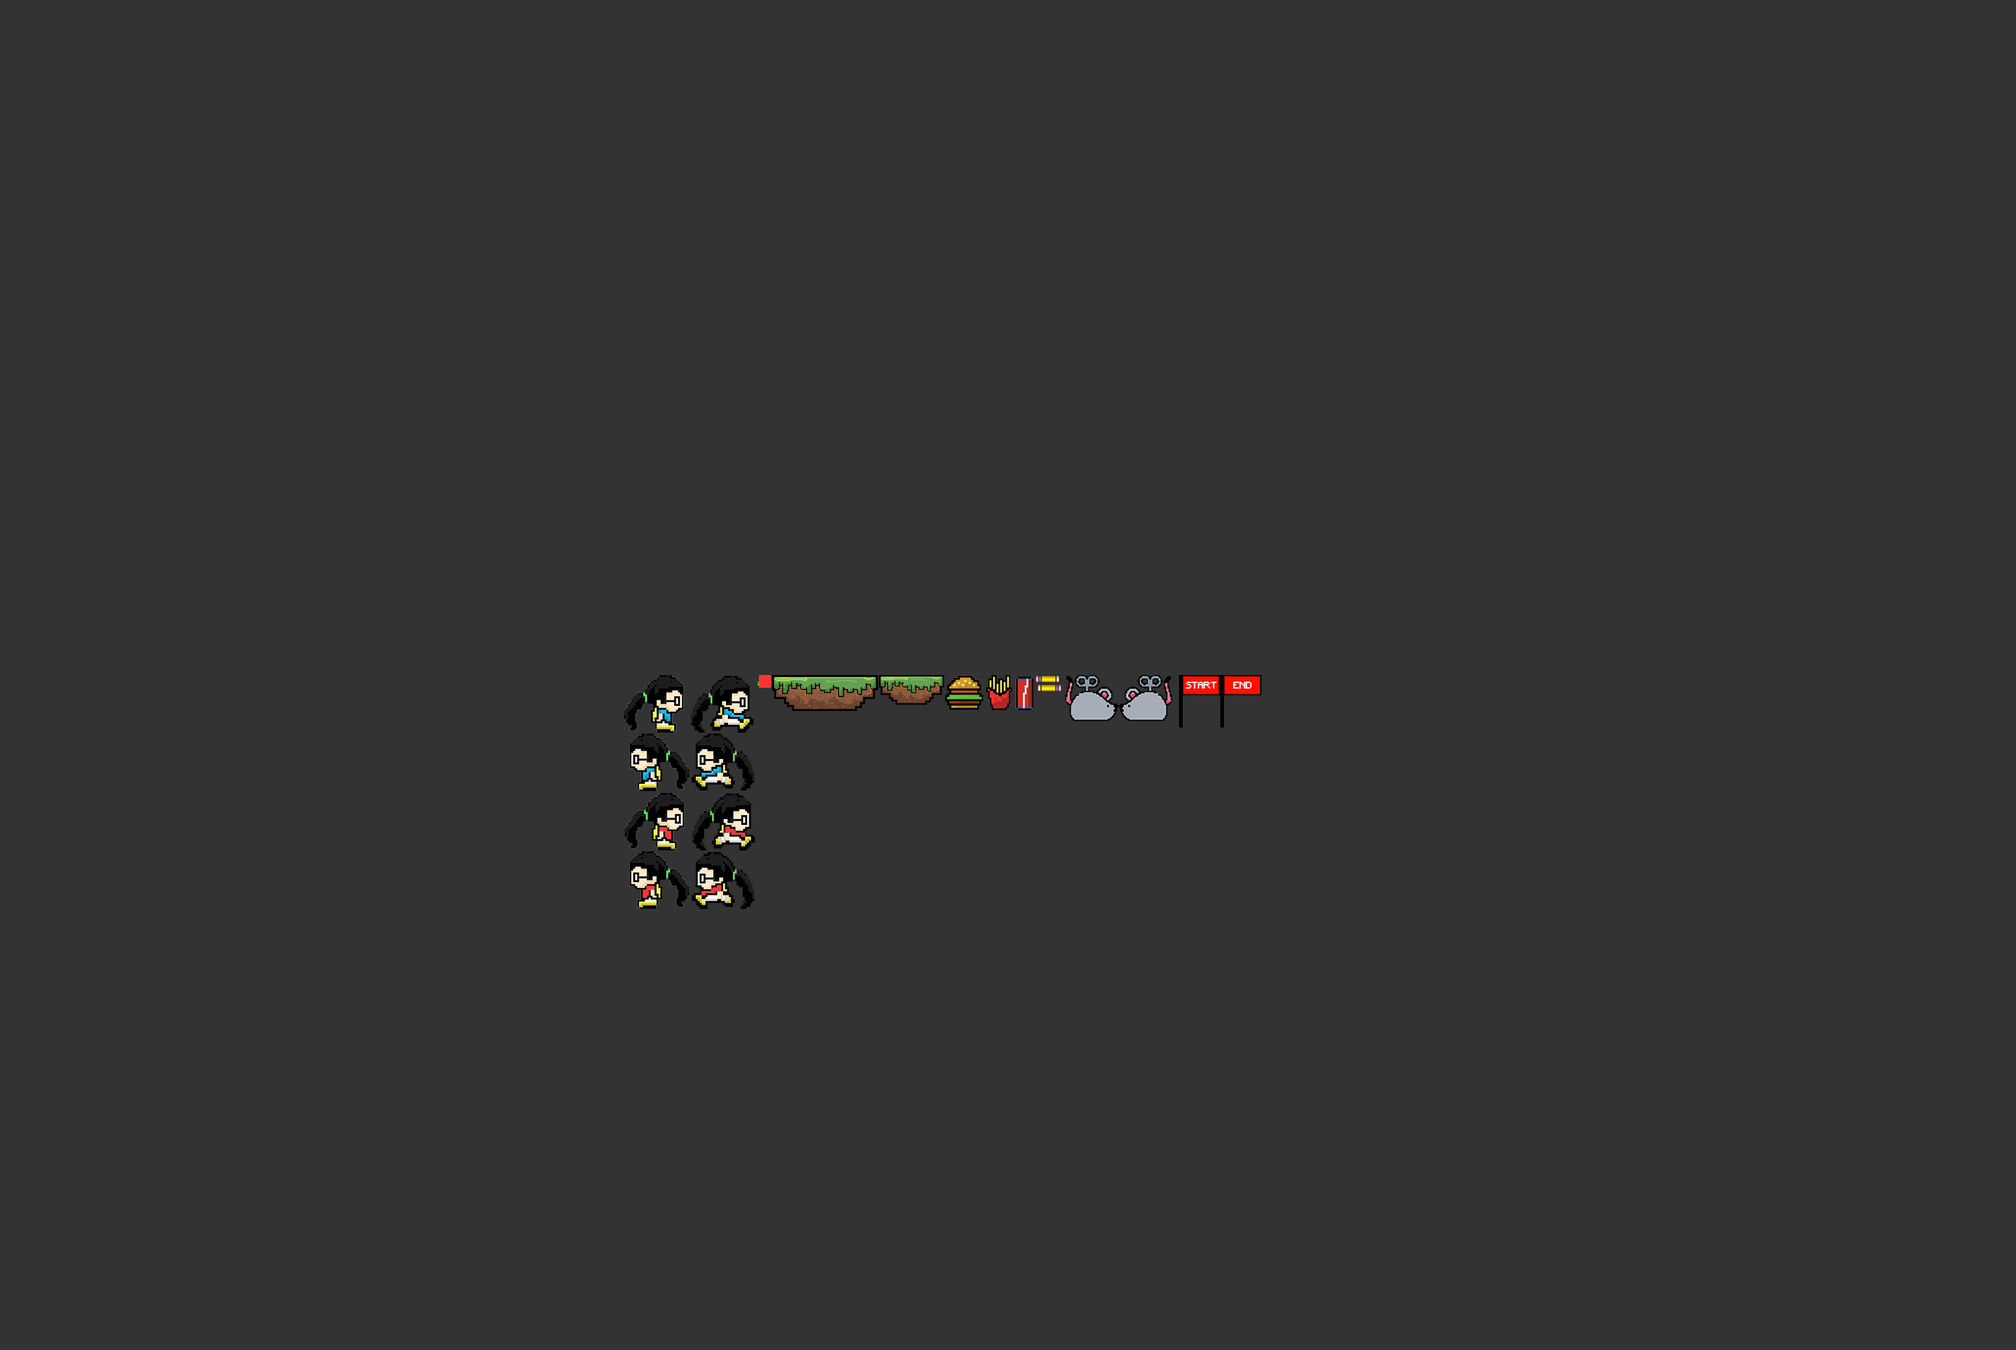
<style>
.page{position:relative;width:2016px;height:1350px;background:#333333}
.page>*{position:absolute;margin:0}
.t1{font:9px "Minecraft";color:#ffffff}
</style>
<div class="page">
<p class="t1" style="left:1186px;top:681px;width:31px;height:8px">START</p>
<p class="t1" style="left:1233px;top:681px;width:19px;height:8px">END</p>
</div>
